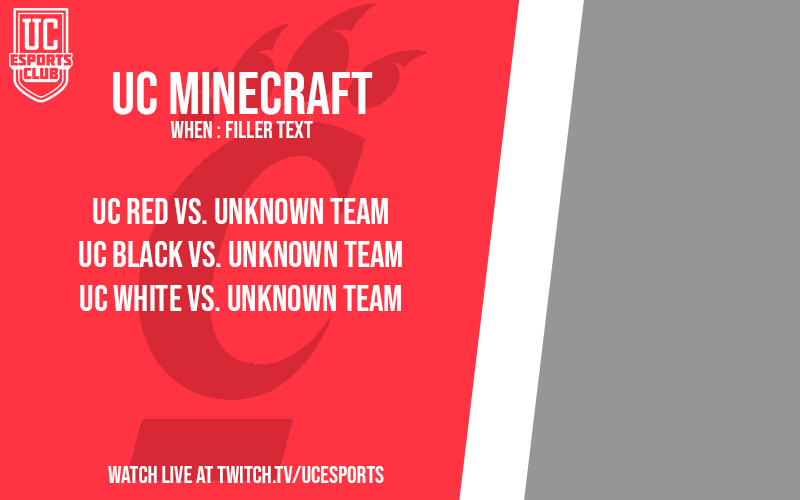
<style>
.page{position:relative;width:800px;height:500px;background:#ff3341}
.page>*{position:absolute;margin:0}
.t1{font:60px "BebasNeue-Regular";color:#fefefe}
.t2{font:24px "BebasNeue-Regular";color:#fefefe}
.t3{font:36px "BebasNeue-Regular";color:#fefefe}
.t4{font:24px "BebasNeue-Regular";color:#ffffff}
</style>
<div class="page">
<p class="t1" style="left:113px;top:71px;width:260px;height:44px">UC MINECRAFT</p>
<p class="t2" style="left:170px;top:121px;width:143px;height:17px">when : Filler text</p>
<p class="t3" style="left:79px;top:198px;width:323px;height:113px;text-align:center">uc red vs. unknown team<br>uc black vs. unknown team<br>uc white vs. unknown team</p>
<p class="t4" style="left:108px;top:466px;width:276px;height:17px">Watch live at twitch.tv/ucesports</p>
</div>
